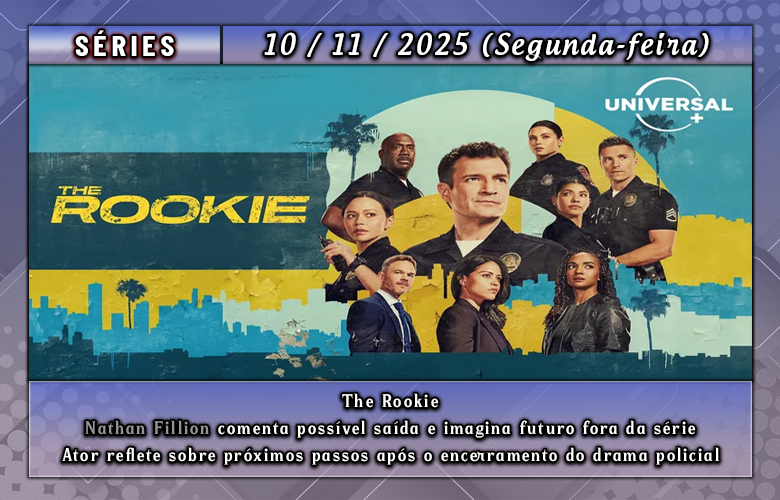
<style>
.page{position:relative;width:780px;height:500px}
.page>*{position:absolute;margin:0}
.t1{font:28.3px "BarlowCondensed-Bold";letter-spacing:0.15em;color:#ffffff;scale:1.09 1}
.t2{font:28.3px "AndrogyneMedium";letter-spacing:0.1em;color:#ffffff;scale:0.92 1}
.t3{font:19.3px/27.1px "Braders";letter-spacing:0.1em;color:#ffffff}
.t4{font:19.3px/27.1px "Braders";letter-spacing:0.1em;color:#959595}
</style>
<div class="page">
<p class="t1" style="left:75px;top:30px;width:99px;height:26px">SÉRIES</p>
<p class="t2" style="left:264px;top:32px;width:445px;height:29px">10 / 11 / 2025 (Segunda-feira)</p>
<p class="t3" style="left:62px;top:393px;width:657px;height:72px;text-align:center">The Rookie<br><span class="t4">Nathan Fillion</span> comenta possível saída e imagina futuro fora da série<br>Ator reflete sobre próximos passos após o encerramento do drama policial</p>
</div>
